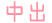
<style>
.page{position:relative;width:52px;height:23px;background:#ffffff}
.page>*{position:absolute;margin:0}
.t1{font:26px "¢è?";color:#ff93a5}
</style>
<div class="page">
<p class="t1" style="left:6px;top:1px;width:39px;height:21px">中出</p>
</div>
